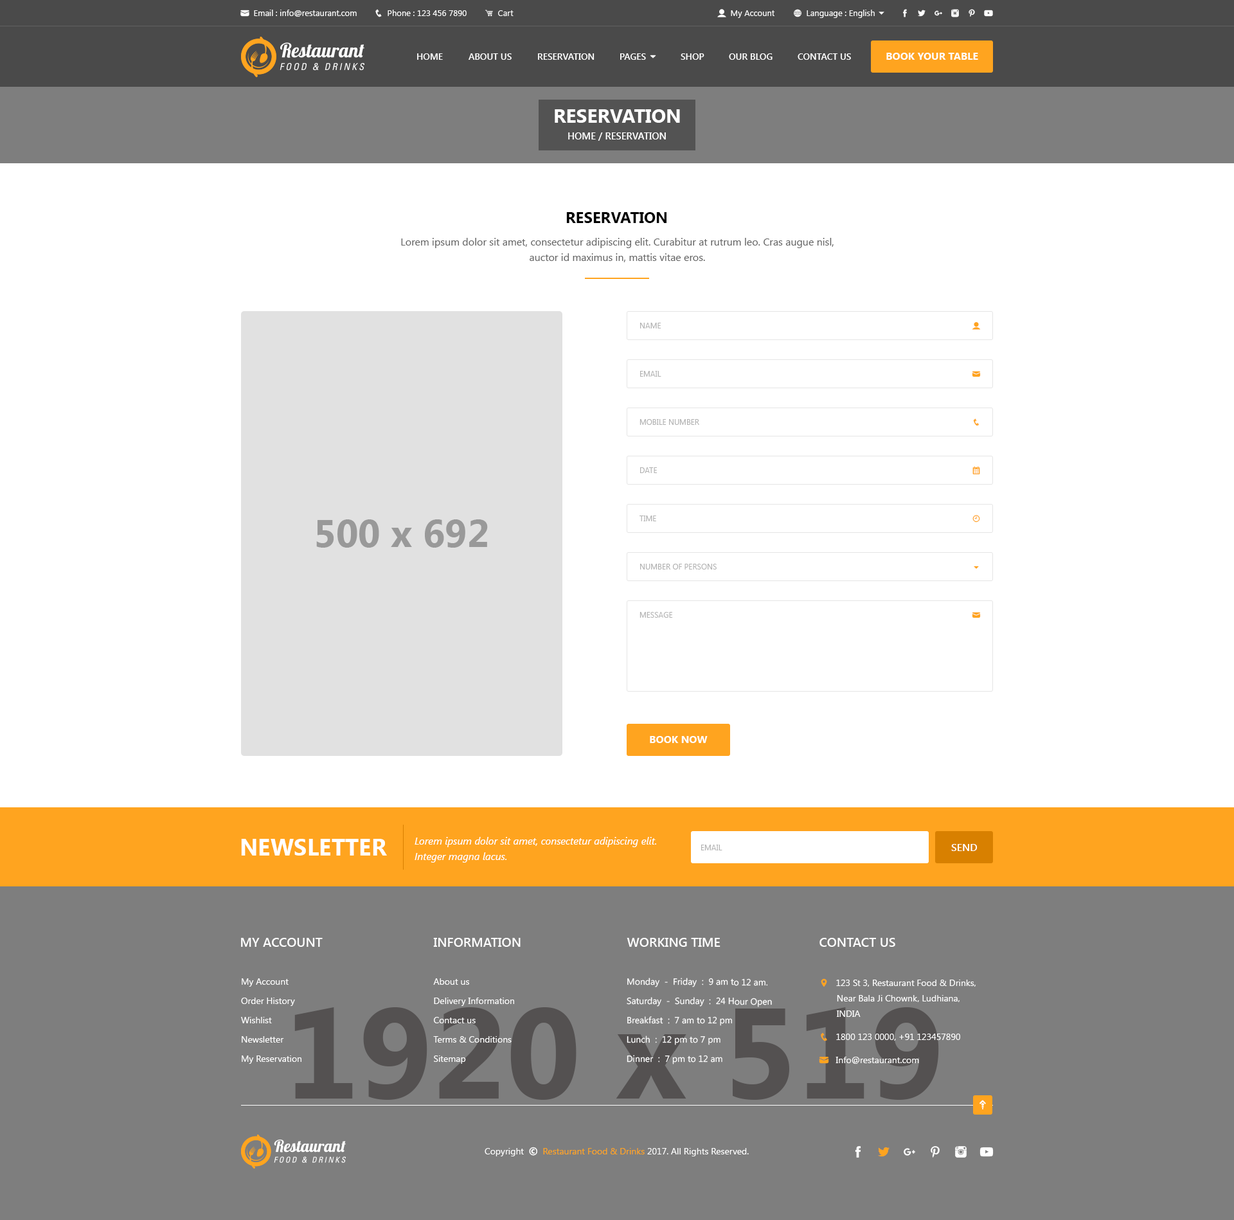
<style>
.page{position:relative;width:1234px;height:1220px;background:#ffffff}
.page>*{position:absolute;margin:0}
.t1{font:9px "SegoeUI-SemiBold";color:#ffffff}
.t2{font:10.3px "SegoeUI-Bold";color:#ffffff}
.t3{font:19.3px "SegoeUI-Bold";color:#ffffff}
.t4{font:9.6px "SegoeUI-SemiBold";color:#ffffff}
.t5{font:15.4px "SegoeUI-Bold";color:#000000}
.t6{font:10.3px/15.4px "SegoeUI";color:#686868}
.t7{font:7.7px "SegoeUI";color:#b2b2b2}
.t8{font:38.6px "SegoeUI-Bold";color:#999999}
.t9{font:23.1px "SegoeUI-Bold";color:#ffffff}
.t10{font:10.3px/15.4px "SegoeUI-Italic";color:#ffffff}
.t11{font:7.7px "SegoeUI";color:#b2b2b2;text-transform:uppercase}
.t12{font:10.3px "SegoeUI-SemiBold";color:#ffffff}
.t13{font:12.9px "SegoeUI-SemiBold";color:#ffffff}
.t14{font:9px/19.3px "SegoeUI";color:#ffffff}
.t15{font:128.6px "SegoeUI-Bold";color:#545151}
</style>
<div class="page">
<p class="t1" style="left:417px;top:53px;width:26px;height:7px">HOME</p>
<p class="t1" style="left:469px;top:53px;width:43px;height:7px">ABOUT US</p>
<p class="t1" style="left:538px;top:53px;width:57px;height:7px">RESERVATION</p>
<p class="t1" style="left:681px;top:53px;width:24px;height:7px">SHOP</p>
<p class="t1" style="left:729px;top:53px;width:44px;height:7px">OUR BLOG</p>
<p class="t1" style="left:798px;top:53px;width:53px;height:7px">CONTACT US</p>
<p class="t2" style="left:886px;top:53px;width:92px;height:7px">BOOK YOUR TABLE</p>
<p class="t3" style="left:555px;top:109px;width:125px;height:14px">RESERVATION</p>
<p class="t4" style="left:568px;top:132px;width:98px;height:9px">HOME / RESERVATION</p>
<p class="t5" style="left:566px;top:212px;width:101px;height:11px">RESERVATION</p>
<p class="t6" style="left:401px;top:238px;width:433px;height:24px;text-align:center">Lorem ipsum dolor sit amet, consectetur adipiscing elit. Curabitur at rutrum leo. Cras augue nisl, auctor id maximus in, mattis vitae eros.</p>
<p class="t7" style="left:640px;top:323px;width:21px;height:5px">NAME</p>
<p class="t7" style="left:640px;top:371px;width:21px;height:6px">EMAIL</p>
<p class="t7" style="left:640px;top:419px;width:59px;height:6px">MOBILE NUMBER</p>
<p class="t7" style="left:640px;top:467px;width:18px;height:6px">DATE</p>
<p class="t8" style="left:316px;top:519px;width:172px;height:29px">500 x 692</p>
<p class="t7" style="left:640px;top:516px;width:16px;height:5px">TIME</p>
<p class="t7" style="left:640px;top:564px;width:77px;height:6px">NUMBER OF PERSONS</p>
<p class="t7" style="left:640px;top:612px;width:33px;height:6px">MESSAGE</p>
<p class="t2" style="left:650px;top:736px;width:58px;height:7px">BOOK NOW</p>
<p class="t9" style="left:241px;top:839px;width:146px;height:17px">NEWSLETTER</p>
<p class="t10" style="left:415px;top:837px;width:241px;height:26px">Lorem ipsum dolor sit amet, consectetur adipiscing elit. Integer magna lacus.</p>
<p class="t11" style="left:701px;top:845px;width:22px;height:5px">Email</p>
<p class="t12" style="left:951px;top:844px;width:27px;height:7px">SEND</p>
<p class="t13" style="left:241px;top:938px;width:82px;height:9px">MY ACCOUNT</p>
<p class="t13" style="left:433px;top:938px;width:88px;height:9px">INFORMATION</p>
<p class="t13" style="left:627px;top:938px;width:94px;height:9px">WORKING TIME</p>
<p class="t13" style="left:820px;top:938px;width:75px;height:9px">CONTACT US</p>
<p class="t14" style="left:627px;top:978px;width:145px;height:87px">Monday  -  Friday  :  9 am to 12 am.<br>Saturday  -  Sunday  :  24 Hour Open<br>Breakfast  :  7 am to 12 pm<br>Lunch  :  12 pm to 7 pm<br>Dinner  :  7 pm to 12 am</p>
<p class="t14" style="left:241px;top:978px;width:60px;height:86px">My Account<br>Order History<br>Wishlist<br>Newsletter<br>My Reservation</p>
<p class="t14" style="left:433px;top:978px;width:81px;height:86px">About us<br>Delivery Information<br>Contact us<br>Terms &amp; Conditions<br>Sitemap</p>
<p class="t15" style="left:294px;top:1007px;width:645px;height:93px">1920 x 519</p>
</div>
